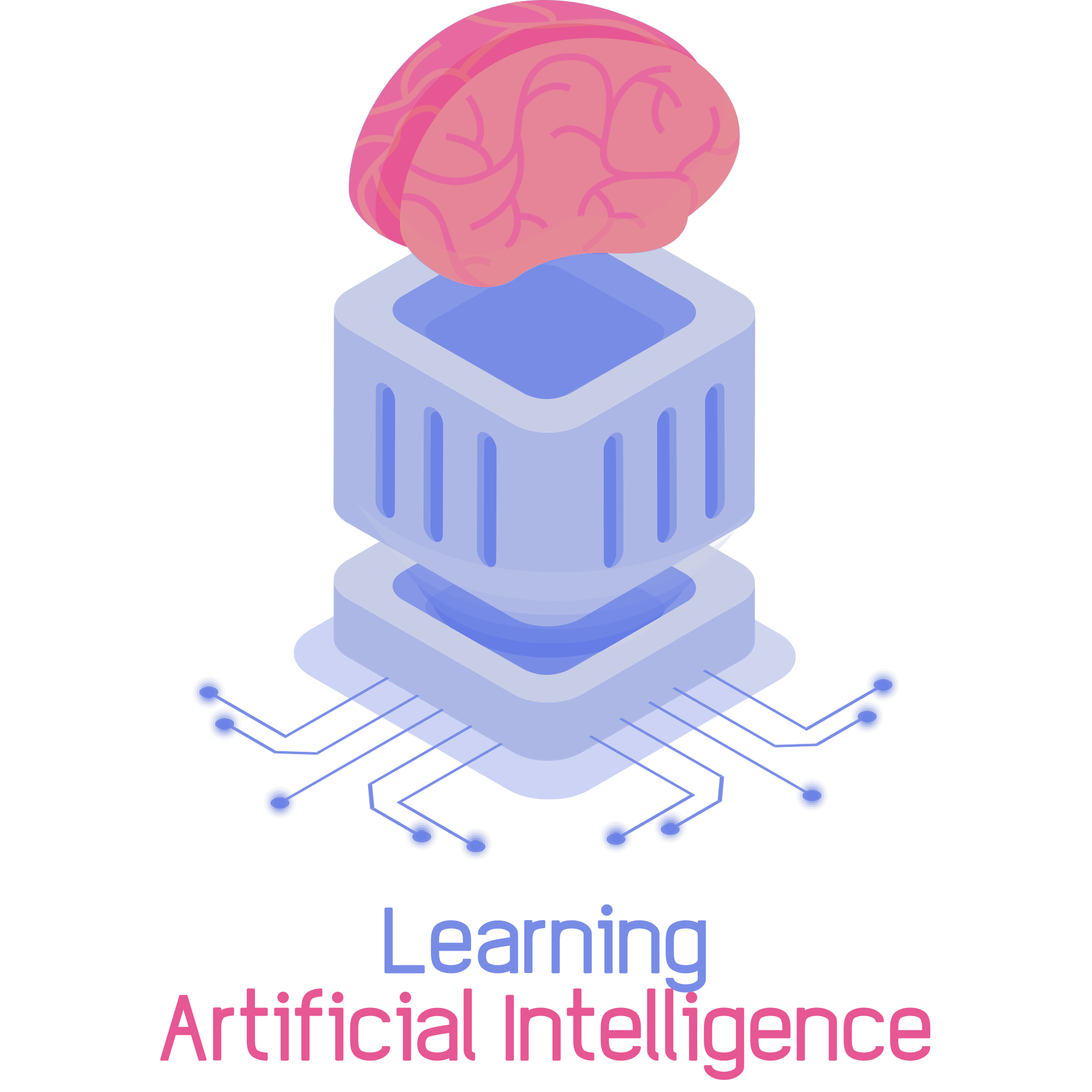
<style>
.page{position:relative;width:1092px;height:1092px;background:#ffffff}
.page>*{position:absolute;margin:0}
.t1{font:65.5px/87.4px "EleganTech";color:#e65793;font-weight:bold}
.t2{font:65.5px/87.4px "EleganTech";color:#788ce6;font-weight:bold}
</style>
<div class="page">
<p class="t1" style="left:160px;top:904px;width:770px;height:176px;text-align:center"><span class="t2">Learning<br></span>Artificial Intelligence</p>
</div>
